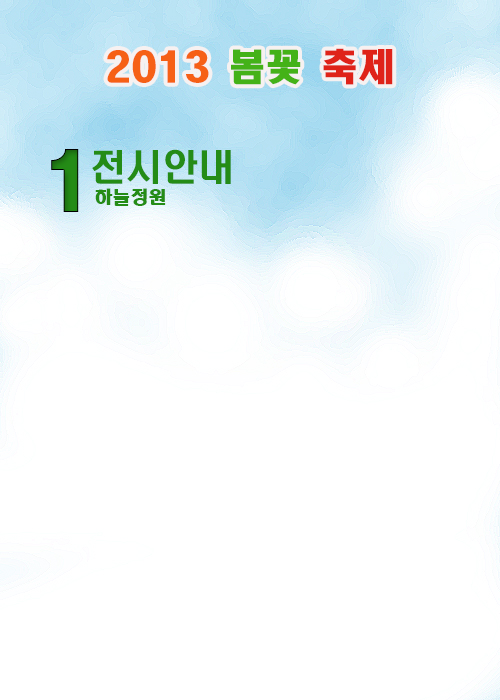
<style>
.page{position:relative;width:500px;height:700px;background:#ffffff}
.page>*{position:absolute;margin:0}
.t1{font:37px "HeadlineR-HM";color:#f66016}
.t2{font:37px "HeadlineR-HM";color:#44b218}
.t3{font:37px "HeadlineR-HM";color:#df2319}
.t4{font:72px "HeadlineR-HM";color:#248c16}
.t5{font:36px "H2hdrM";color:#248c16}
.t6{font:18px "HeadlineR-HM";color:#248c16}
</style>
<div class="page">
<p class="t1" style="left:107px;top:48px;width:286px;height:37px">2013 <span class="t2">봄꽃 </span><span class="t3">축제</span></p>
<p class="t4" style="left:51px;top:149px;width:28px;height:63px">1</p>
<p class="t5" style="left:92px;top:149px;width:139px;height:35px">전시안내</p>
<p class="t6" style="left:95px;top:188px;width:71px;height:18px">하늘정원</p>
</div>
